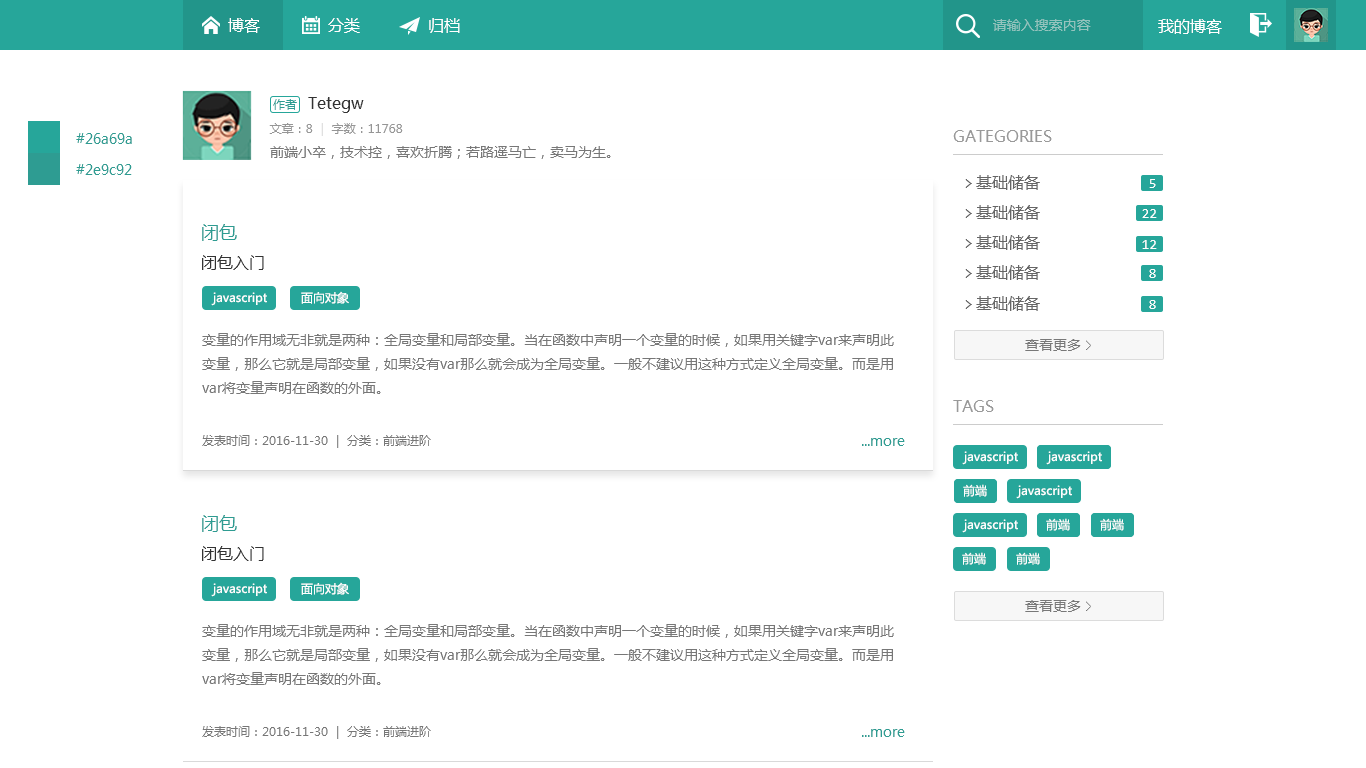
<style>
.page{position:relative;width:1366px;height:768px;background:#ffffff}
.page>*{position:absolute;margin:0}
.t1{font:16px "MicrosoftYaHei";color:#ffffff}
.t2{font:14px "MicrosoftYaHei";color:#95c4be}
.t3{font:12px "MicrosoftYaHei";color:#2e9c92}
.t4{font:16px "MicrosoftYaHei";color:#333333}
.t5{font:12px "MicrosoftYaHei";color:#969696}
.t6{font:12px "MicrosoftYaHei";color:#dbdbdb}
.t7{font:14px "MicrosoftYaHei";color:#2e9c92}
.t8{font:16px "MicrosoftYaHei";color:#999999}
.t9{font:14px "MicrosoftYaHei";color:#777777}
.t10{font:16px "MicrosoftYaHei";color:#666666}
.t11{font:16px "Consolas";color:#666666}
.t12{font:14px "Consolas";color:#fefefe}
.t13{font:18px "MicrosoftYaHei";color:#2e9c92}
.t14{font:12px "MicrosoftYaHei";color:#fefefe}
.t15{font:14px/24px "MicrosoftYaHei";color:#777777}
.t16{font:14px "MicrosoftYaHei";color:#787878}
.t17{font:14px "FangSong";color:#787878}
.t18{font:12px "MicrosoftYaHei";color:#777777}
</style>
<div class="page">
<p class="t1" style="left:228px;top:18px;width:32px;height:15px">博客</p>
<p class="t1" style="left:328px;top:18px;width:32px;height:15px">分类</p>
<p class="t1" style="left:429px;top:18px;width:31px;height:15px">归档</p>
<p class="t2" style="left:993px;top:19px;width:98px;height:12px">请输入搜索内容</p>
<p class="t1" style="left:1158px;top:19px;width:64px;height:15px">我的博客</p>
<p class="t3" style="left:273px;top:99px;width:24px;height:11px">作者</p>
<p class="t4" style="left:308px;top:97px;width:56px;height:16px">Tetegw</p>
<p class="t5" style="left:269px;top:123px;width:134px;height:13px">文章：8 <span class="t6"> | </span> 字数：11768</p>
<p class="t7" style="left:76px;top:133px;width:56px;height:11px">#26a69a</p>
<p class="t8" style="left:953px;top:130px;width:99px;height:12px">GATEGORIES</p>
<p class="t9" style="left:270px;top:146px;width:341px;height:13px">前端小卒，技术控，喜欢折腾；若路遥马亡，卖马为生。</p>
<p class="t7" style="left:76px;top:164px;width:56px;height:11px">#2e9c92</p>
<p class="t10" style="left:965px;top:175px;width:75px;height:15px"><span class="t11">&gt; </span>基础储备</p>
<p class="t12" style="left:1149px;top:179px;width:7px;height:9px">5</p>
<p class="t10" style="left:965px;top:205px;width:75px;height:15px"><span class="t11">&gt; </span>基础储备</p>
<p class="t12" style="left:1142px;top:209px;width:15px;height:9px">22</p>
<p class="t13" style="left:202px;top:224px;width:35px;height:17px">闭包</p>
<p class="t10" style="left:965px;top:235px;width:75px;height:15px"><span class="t11">&gt; </span>基础储备</p>
<p class="t12" style="left:1142px;top:240px;width:15px;height:9px">12</p>
<p class="t4" style="left:202px;top:255px;width:62px;height:15px">闭包入门</p>
<p class="t10" style="left:965px;top:265px;width:75px;height:15px"><span class="t11">&gt; </span>基础储备</p>
<p class="t12" style="left:1149px;top:269px;width:7px;height:9px">8</p>
<p class="t14" style="left:211px;top:292px;width:56px;height:14px">javascript</p>
<p class="t14" style="left:301px;top:291px;width:48px;height:13px">面向对象</p>
<p class="t10" style="left:965px;top:296px;width:75px;height:15px"><span class="t11">&gt; </span>基础储备</p>
<p class="t12" style="left:1149px;top:300px;width:7px;height:9px">8</p>
<p class="t15" style="left:202px;top:333px;width:692px;height:61px">变量的作用域无非就是两种：全局变量和局部变量。当在函数中声明一个变量的时候，如果用关键字var来声明此变量，那么它就是局部变量，如果没有var那么就会成为全局变量。一般不建议用这种方式定义全局变量。而是用var将变量声明在函数的外面。</p>
<p class="t16" style="left:1025px;top:339px;width:66px;height:12px">查看更多 <span class="t17">&gt;</span></p>
<p class="t8" style="left:953px;top:400px;width:41px;height:12px">TAGS</p>
<p class="t18" style="left:202px;top:435px;width:229px;height:13px">发表时间：2016-11-30  |  分类：前端进阶</p>
<p class="t7" style="left:862px;top:438px;width:43px;height:8px">...more</p>
<p class="t14" style="left:962px;top:451px;width:56px;height:14px">javascript</p>
<p class="t14" style="left:1046px;top:451px;width:56px;height:14px">javascript</p>
<p class="t14" style="left:1046px;top:451px;width:56px;height:14px">javascript</p>
<p class="t14" style="left:963px;top:484px;width:24px;height:13px">前端</p>
<p class="t14" style="left:963px;top:484px;width:24px;height:13px">前端</p>
<p class="t14" style="left:1016px;top:485px;width:56px;height:14px">javascript</p>
<p class="t13" style="left:202px;top:515px;width:35px;height:17px">闭包</p>
<p class="t14" style="left:962px;top:519px;width:56px;height:14px">javascript</p>
<p class="t14" style="left:1046px;top:518px;width:24px;height:13px">前端</p>
<p class="t14" style="left:1046px;top:518px;width:24px;height:13px">前端</p>
<p class="t14" style="left:1100px;top:518px;width:24px;height:13px">前端</p>
<p class="t14" style="left:1100px;top:518px;width:24px;height:13px">前端</p>
<p class="t4" style="left:202px;top:546px;width:62px;height:15px">闭包入门</p>
<p class="t14" style="left:962px;top:552px;width:24px;height:13px">前端</p>
<p class="t14" style="left:1016px;top:552px;width:24px;height:13px">前端</p>
<p class="t14" style="left:301px;top:582px;width:48px;height:13px">面向对象</p>
<p class="t14" style="left:211px;top:583px;width:56px;height:14px">javascript</p>
<p class="t16" style="left:1025px;top:600px;width:66px;height:12px">查看更多 <span class="t17">&gt;</span></p>
<p class="t15" style="left:202px;top:624px;width:692px;height:61px">变量的作用域无非就是两种：全局变量和局部变量。当在函数中声明一个变量的时候，如果用关键字var来声明此变量，那么它就是局部变量，如果没有var那么就会成为全局变量。一般不建议用这种方式定义全局变量。而是用var将变量声明在函数的外面。</p>
<p class="t18" style="left:202px;top:726px;width:229px;height:13px">发表时间：2016-11-30  |  分类：前端进阶</p>
<p class="t7" style="left:862px;top:729px;width:43px;height:8px">...more</p>
</div>
